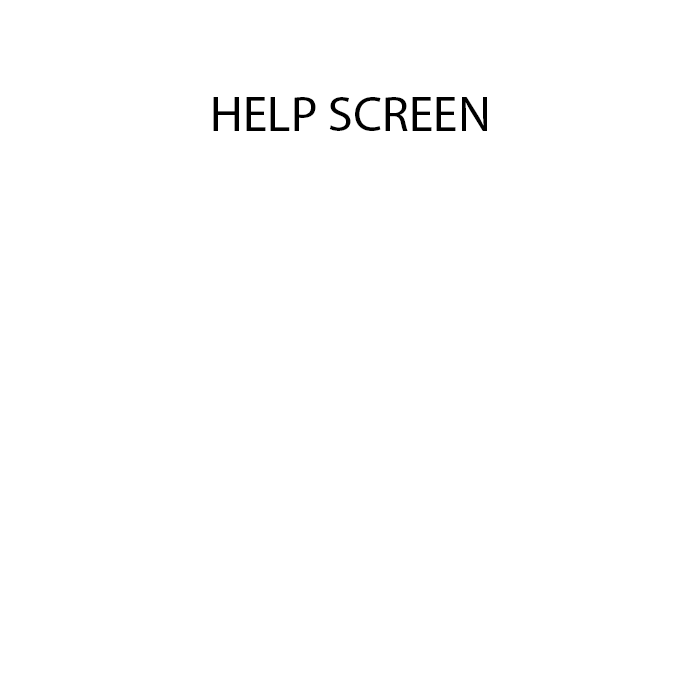
<style>
.page{position:relative;width:700px;height:700px;background:#ffffff}
.page>*{position:absolute;margin:0}
.t1{font:12px "MyriadPro-Regular";color:#000000}
</style>
<div class="page">
<p class="t1" style="left:213px;top:97px;width:274px;height:34px">HELP SCREEN</p>
</div>
